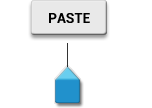
<style>
.page{position:relative;width:152px;height:108px;background:#ffffff}
.page>*{position:absolute;margin:0}
.t1{font:14px "Roboto-Bold";color:#000000}
</style>
<div class="page">
<p class="t1" style="left:49px;top:13px;width:41px;height:10px">PASTE</p>
</div>
